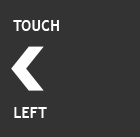
<style>
.page{position:relative;width:140px;height:137px;background:#333333}
.page>*{position:absolute;margin:0}
.t1{font:14.8px "TrebuchetMS-Bold";color:#ffffff}
</style>
<div class="page">
<p class="t1" style="left:13px;top:20px;width:46px;height:11px">TOUCH</p>
<p class="t1" style="left:14px;top:107px;width:33px;height:11px">LEFT</p>
</div>
